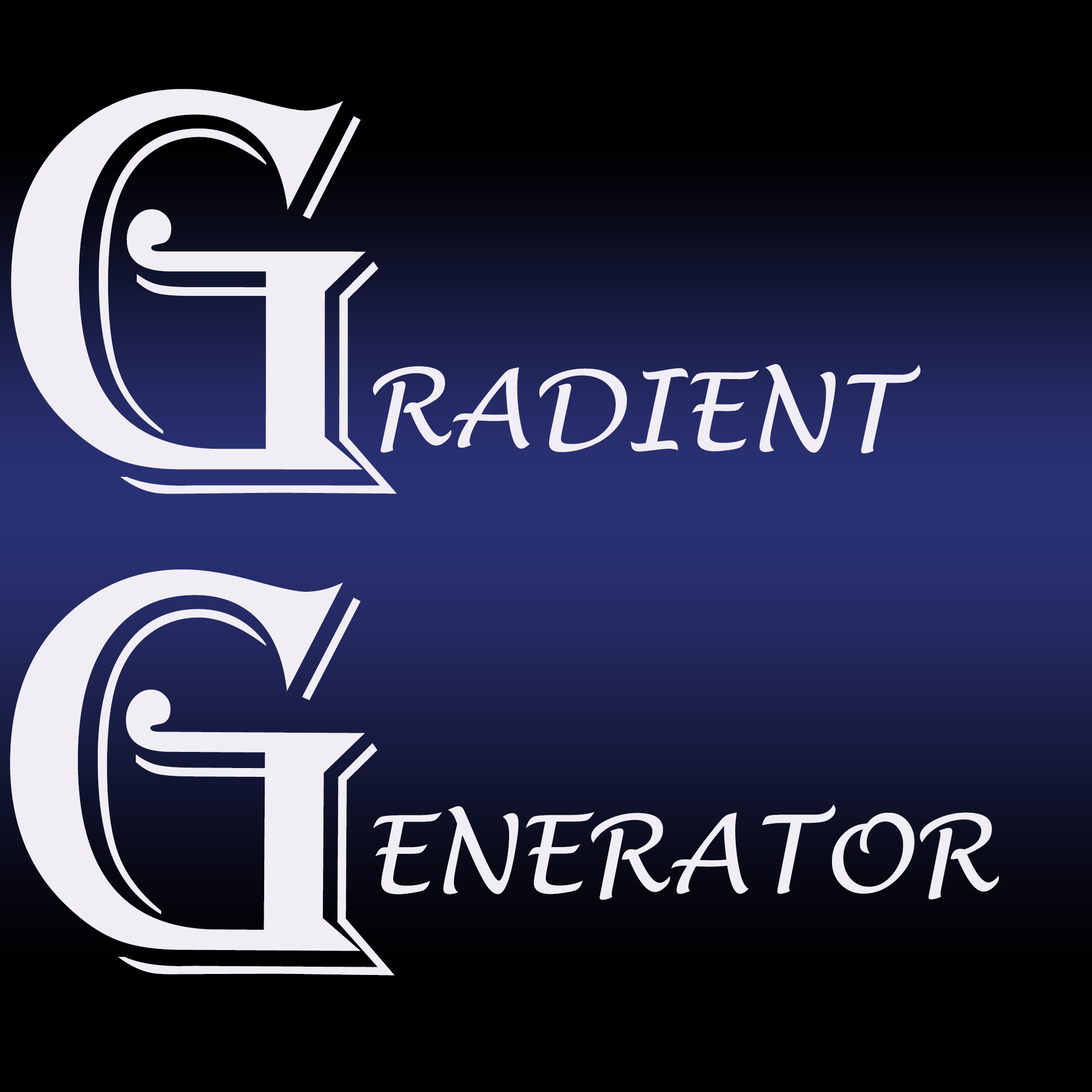
<style>
.page{position:relative;width:1092px;height:1092px;background:#000000}
.page>*{position:absolute;margin:0}
.t1{font:604px "Algerian";color:#f0edf5}
.t2{font:106.4px "LucidaHandwriting-Italic";color:#f0edf5}
</style>
<div class="page">
<p class="t1" style="left:11px;top:89px;width:386px;height:405px">G</p>
<p class="t2" style="left:373px;top:364px;width:547px;height:89px;rotate:1deg">RADIENT</p>
<p class="t1" style="left:10px;top:569px;width:385px;height:407px">G</p>
<p class="t2" style="left:373px;top:804px;width:626px;height:96px">ENERATOR</p>
</div>
